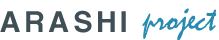
<style>
.page{position:relative;width:219px;height:40px;background:#ffffff}
.page>*{position:absolute;margin:0}
.t1{font:28.8px "Coolvetica";letter-spacing:0.18em;color:#404f55}
.t2{font:36px "Mistral";letter-spacing:-0.02em;color:#278baf}
</style>
<div class="page">
<p class="t1" style="left:0px;top:10px;width:126px;height:23px">ARASHI</p>
<p class="t2" style="left:142px;top:8px;width:74px;height:32px">project</p>
</div>
